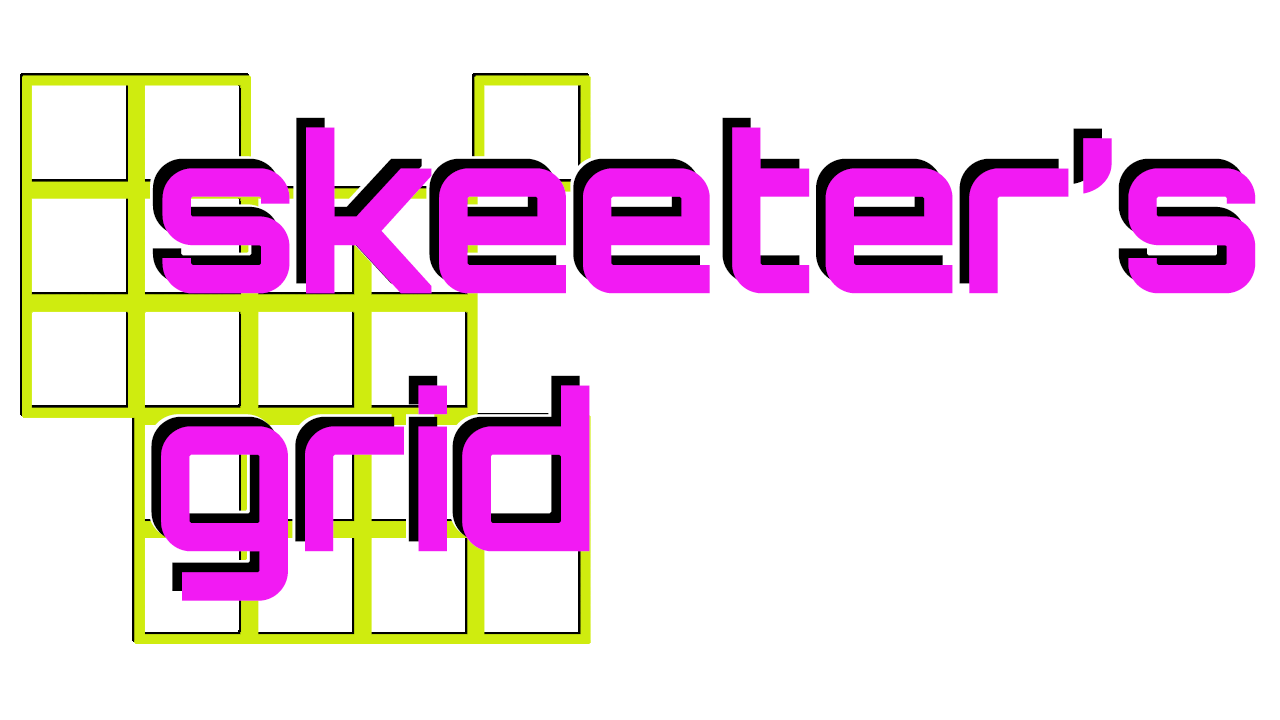
<style>
.page{position:relative;width:1280px;height:720px;background:#ffffff}
.page>*{position:absolute;margin:0}
.t1{font:215px "Orbitron-Bold"}
.t2{font:215px "Orbitron-Bold";color:#f21af3}
</style>
<div class="page">
<p class="t1" style="left:148px;top:115px;width:1095px;height:474px">skeeter’s <br>grid</p>
<p class="t1" style="left:151px;top:117px;width:1095px;height:474px">skeeter’s <br>grid</p>
<p class="t2" style="left:161px;top:127px;width:1095px;height:474px">skeeter’s <br>grid</p>
</div>
